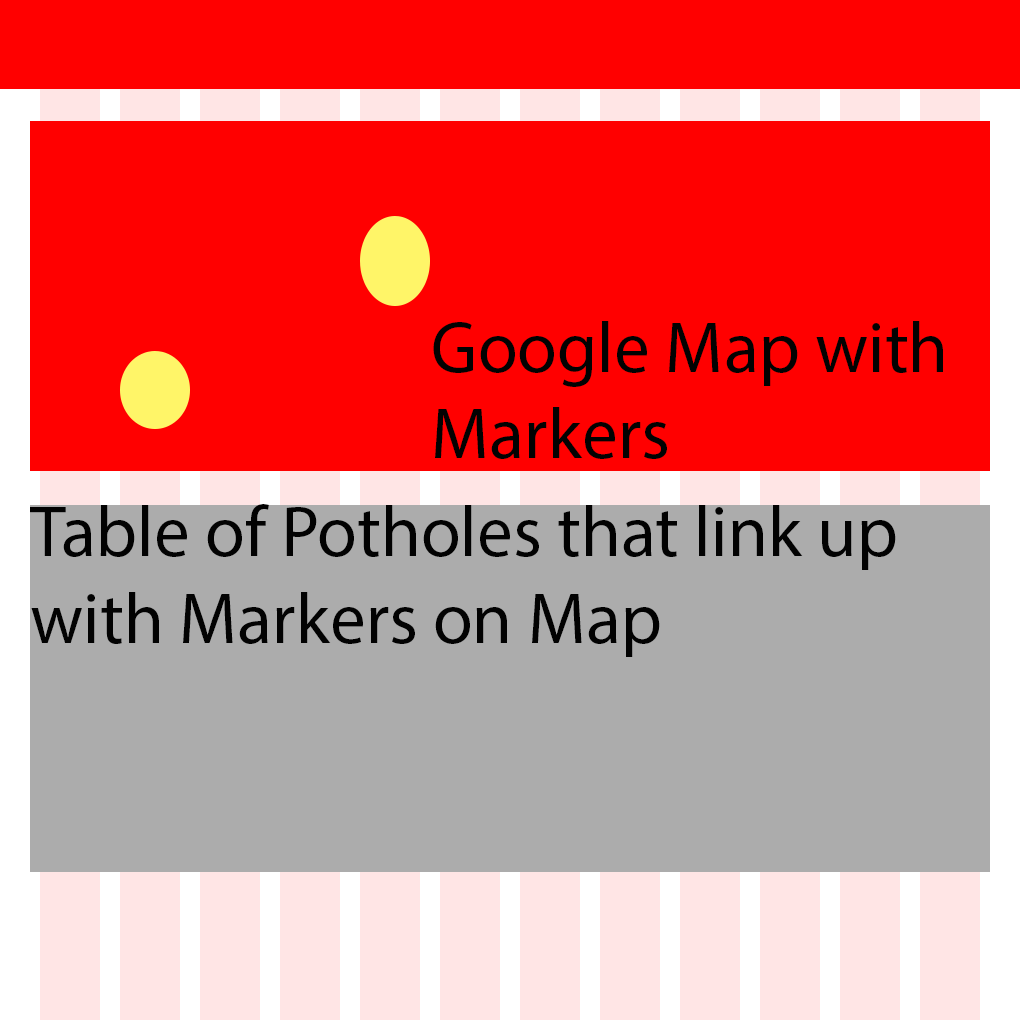
<style>
.page{position:relative;width:1020px;height:1020px;background:#ff0000}
.page>*{position:absolute;margin:0}
.t1{font:72px "MyriadPro-Regular";color:#020202}
</style>
<div class="page">
<p class="t1" style="left:433px;top:321px;width:510px;height:138px">Google Map with <br>Markers</p>
<p class="t1" style="left:30px;top:504px;width:866px;height:153px">Table of Potholes that link up with Markers on Map</p>
</div>
